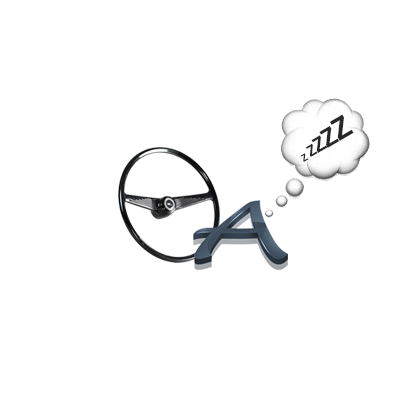
<style>
.page{position:relative;width:400px;height:400px;background:#ffffff}
.page>*{position:absolute;margin:0}
.t1{font:10px "Arial-BoldMT";color:#282828;scale:0.91 1}
.t2{font:15px "Arial-BoldMT";color:#282828;scale:0.91 1}
.t3{font:20px "Arial-BoldMT";color:#282828;scale:0.91 1}
.t4{font:25px "Arial-BoldMT";color:#282828;scale:0.91 1}
.t5{font:30px "Arial-BoldMT";color:#282828;scale:0.91 1}
</style>
<div class="page">
<p class="t1" style="left:300px;top:114px;width:54px;height:48px;rotate:-30deg">Z <span class="t2">Z</span><span class="t3">Z</span><span class="t4">Z</span><span class="t5">Z</span></p>
</div>
